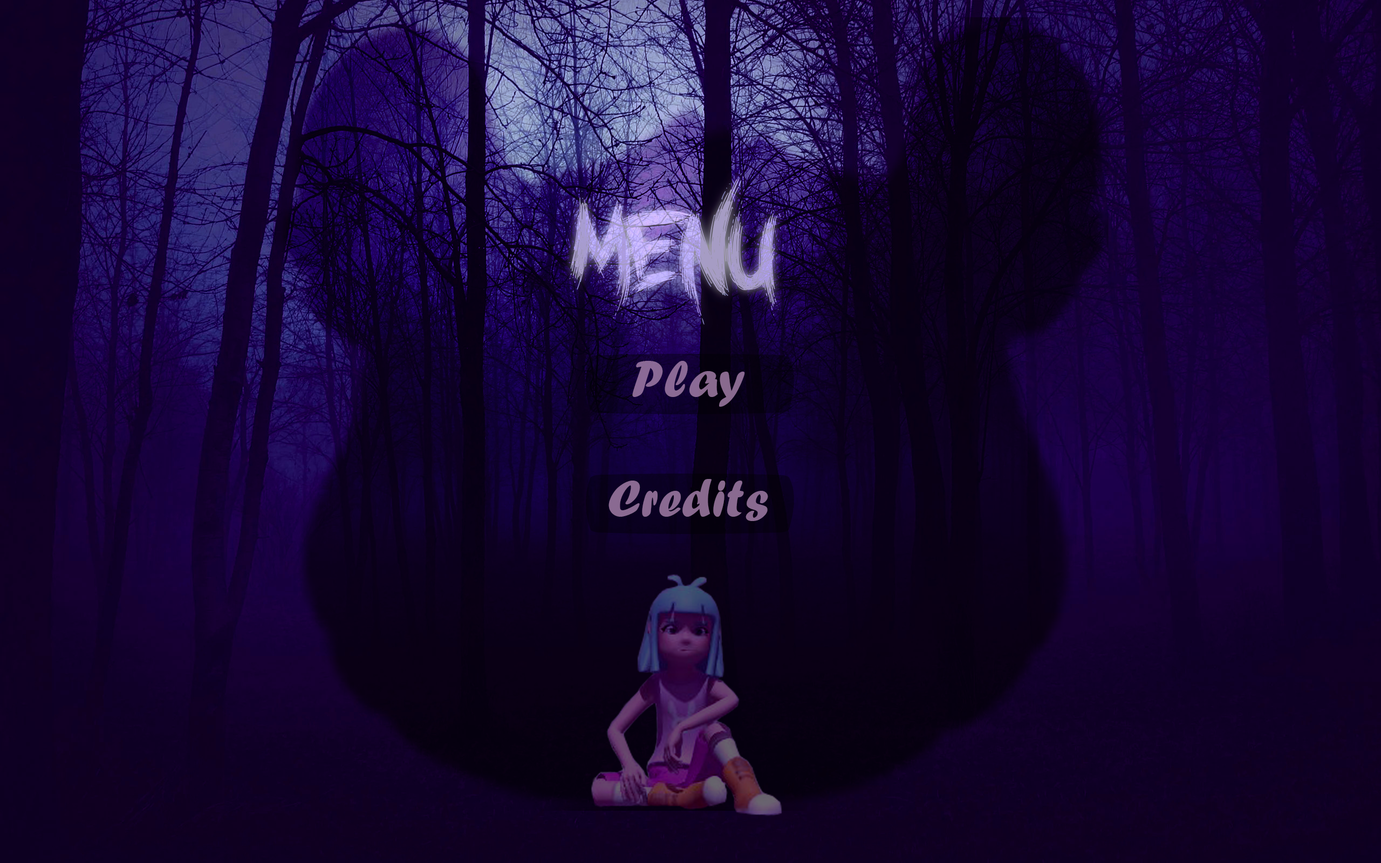
<style>
.page{position:relative;width:1381px;height:863px}
.page>*{position:absolute;margin:0}
.t1{font:107.9px "NightcoreDemo"}
.t2{font:54px "ForteMT";color:#8a6a94}
.t3{font:54px "ForteMT";color:#896a91}
</style>
<div class="page">
<p class="t1" style="left:569px;top:173px;width:212px;height:152px">MENU</p>
<p class="t1" style="left:569px;top:173px;width:212px;height:152px">MENU</p>
<p class="t2" style="left:632px;top:361px;width:113px;height:46px">Play</p>
<p class="t3" style="left:609px;top:479px;width:159px;height:42px">Credits</p>
</div>
